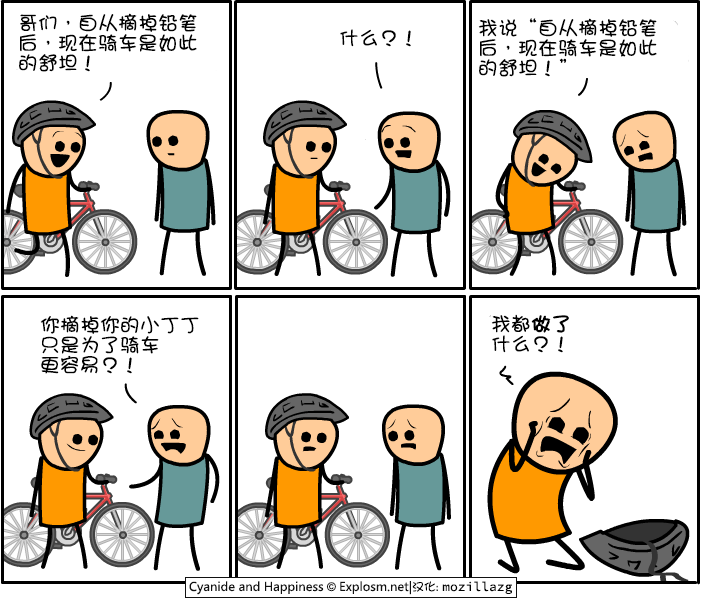
<style>
.page{position:relative;width:701px;height:599px;background:#ffffff}
.page>*{position:absolute;margin:0}
.t1{font:20px/20px "DFGirl";color:#000000}
.t2{font:20px "DFGirl";color:#000000}
.t3{font:20px/20px "DFGirl";color:#000000;font-weight:bold}
</style>
<div class="page">
<p class="t1" style="left:19px;top:13px;width:178px;height:59px">哥们，自从摘掉铅笔<br>后，现在骑车是如此<br>的舒坦！</p>
<p class="t2" style="left:340px;top:29px;width:71px;height:18px">什么？！</p>
<p class="t1" style="left:478px;top:18px;width:179px;height:59px">我说“自从摘掉铅笔<br>后，现在骑车是如此<br>的舒坦！”</p>
<p class="t1" style="left:40px;top:315px;width:159px;height:59px">你摘掉你的小丁丁<br>只是为了骑车<br>更容易？！</p>
<p class="t1" style="left:491px;top:314px;width:78px;height:39px">我都<span class="t3">做了<br></span>什么？！</p>
</div>
